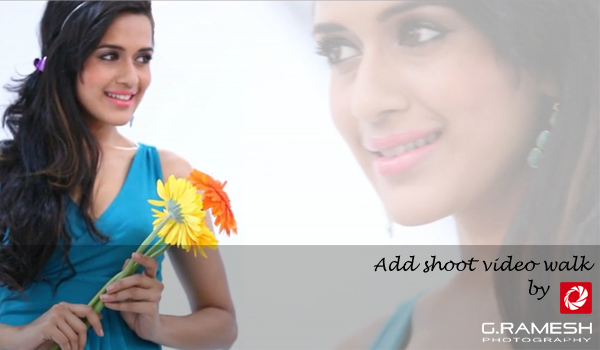
<style>
.page{position:relative;width:600px;height:350px}
.page>*{position:absolute;margin:0}
.t1{font:18px "LucidaHandwriting-Italic";color:#000000}
</style>
<div class="page">
<p class="t1" style="left:373px;top:255px;width:222px;height:18px">Add shoot video walk</p>
<p class="t1" style="left:528px;top:279px;width:22px;height:21px">by</p>
</div>
